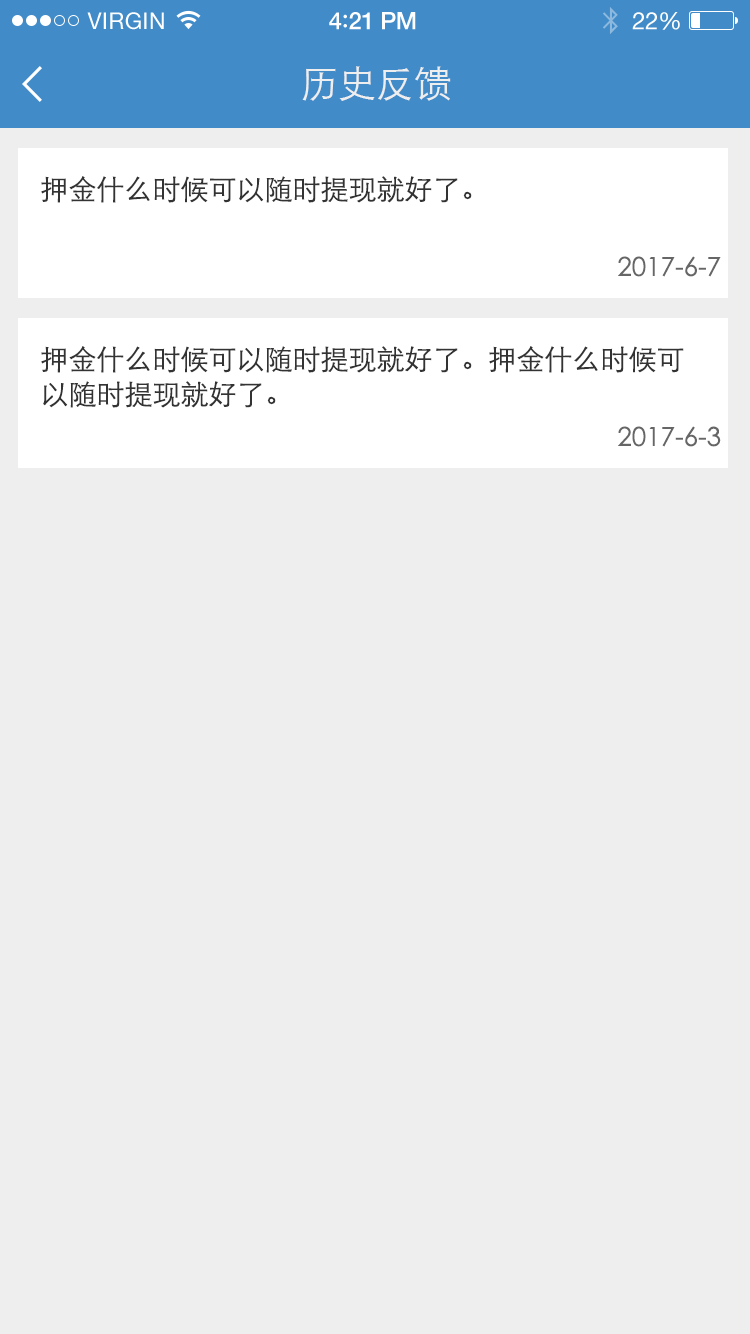
<style>
.page{position:relative;width:750px;height:1334px;background:#eeeeee}
.page>*{position:absolute;margin:0}
.t1{font:23px "HelveticaNeue";letter-spacing:0.02em;color:#ffffff}
.t2{font:24px "HelveticaNeue-Medium";letter-spacing:-0.02em;color:#ffffff}
.t3{font:26px "Avenir-Medium";letter-spacing:-0.02em;color:#ffffff}
.t4{font:24px "HelveticaNeue";letter-spacing:-0.02em;color:#ffffff}
.t5{font:38px "STXihei";color:#eeeeee}
.t6{font:28px "STXihei";color:#333333}
.t7{font:26px "STXihei";color:#666666}
.t8{font:28px/35px "STXihei";color:#333333}
</style>
<div class="page">
<p class="t1" style="left:87px;top:12px;width:77px;height:18px">VIRGIN</p>
<p class="t2" style="left:329px;top:12px;width:87px;height:18px">4<span class="t3">:</span>21 PM</p>
<p class="t4" style="left:632px;top:12px;width:48px;height:18px">22%</p>
<p class="t5" style="left:302px;top:66px;width:149px;height:35px">历史反馈</p>
<p class="t6" style="left:41px;top:176px;width:431px;height:27px">押金什么时候可以随时提现就好了。</p>
<p class="t7" style="left:618px;top:256px;width:103px;height:21px">2017-6-7</p>
<p class="t8" style="left:41px;top:346px;width:643px;height:62px">押金什么时候可以随时提现就好了。押金什么时候可<br>以随时提现就好了。</p>
<p class="t7" style="left:618px;top:426px;width:103px;height:21px">2017-6-3</p>
</div>
